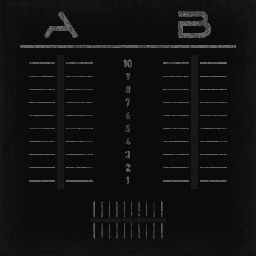
<style>
.page{position:relative;width:256px;height:256px;background:#0b0b0b}
.page>*{position:absolute;margin:0}
.t1{font:36px "D3-Euronism-Bold";letter-spacing:-0.14em;color:#5f5f5f}
.t2{font:36px "D3-Euronism-Bold";letter-spacing:-0.14em;color:#505050}
.t3{font:10px "Bahnschrift";color:#626262}
.t4{font:10px "Bahnschrift";letter-spacing:-0.14em;color:#404040}
.t5{font:10px "Bahnschrift";letter-spacing:-0.14em;color:#444444}
.t6{font:10px "Bahnschrift";letter-spacing:-0.14em;color:#3b3b3b}
.t7{font:10px "Bahnschrift";letter-spacing:-0.14em;color:#3d3d3d}
.t8{font:10px "Bahnschrift";letter-spacing:-0.14em;color:#414141}
.t9{font:10px "Bahnschrift";letter-spacing:-0.14em}
.t10{font:10px "Bahnschrift";letter-spacing:-0.14em;color:#656565}
</style>
<div class="page">
<p class="t1" style="left:44px;top:11px;width:34px;height:27px">A</p>
<p class="t2" style="left:178px;top:11px;width:33px;height:27px">B</p>
<p class="t3" style="left:123px;top:59px;width:9px;height:9px">10</p>
<p class="t4" style="left:126px;top:73px;width:4px;height:7px">9</p>
<p class="t5" style="left:125px;top:86px;width:6px;height:7px">8</p>
<p class="t6" style="left:125px;top:98px;width:5px;height:9px">7</p>
<p class="t7" style="left:126px;top:112px;width:4px;height:7px">6</p>
<p class="t7" style="left:125px;top:125px;width:5px;height:7px">5</p>
<p class="t8" style="left:125px;top:138px;width:6px;height:7px">4</p>
<p class="t9" style="left:125px;top:151px;width:5px;height:7px">3</p>
<p class="t10" style="left:125px;top:163px;width:6px;height:9px">2</p>
<p class="t9" style="left:126px;top:176px;width:3px;height:9px">1</p>
</div>
